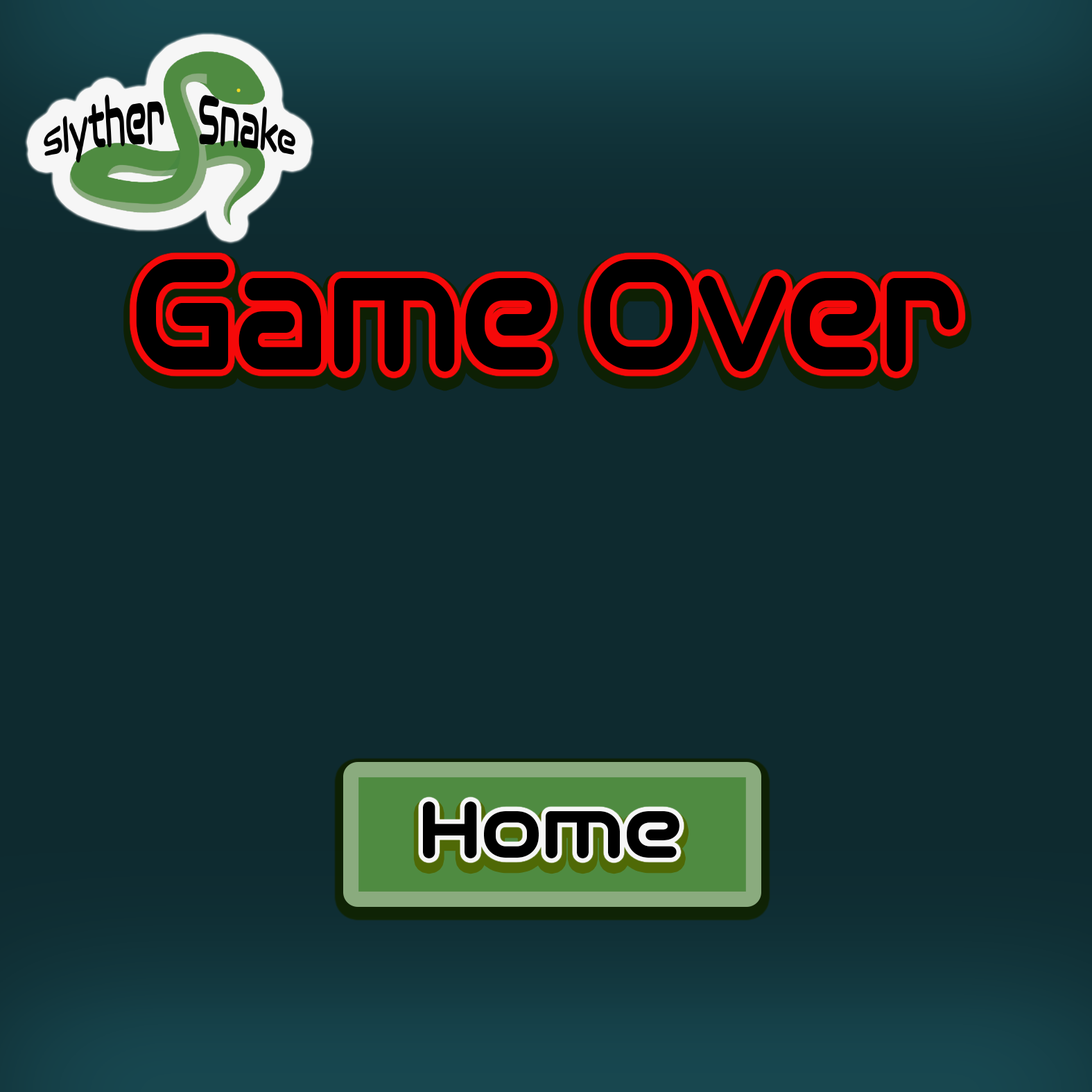
<style>
.page{position:relative;width:1092px;height:1092px;background:#0e2a2f}
.page>*{position:absolute;margin:0}
.t1{font:173.1px "OmniumWide-ExtraBold";color:#000000;scale:0.82 1}
.t2{font:87.5px "OmniumWide-ExtraBold";color:#000000}
</style>
<div class="page">
<p class="t1" style="left:136px;top:259px;width:823px;height:113px">Game Over</p>
<p class="t2" style="left:423px;top:801px;width:256px;height:57px">Home</p>
</div>
